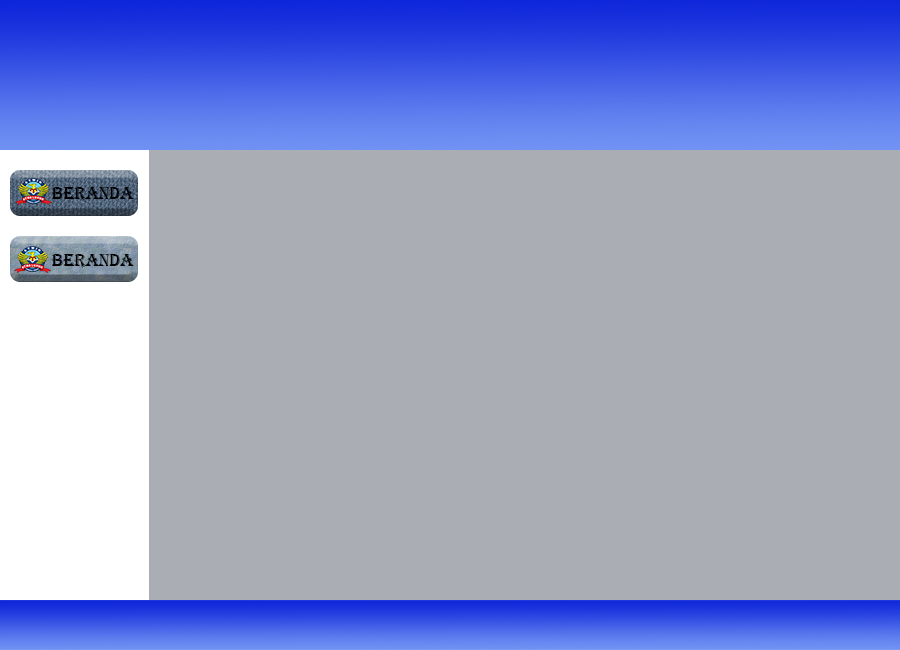
<style>
.page{position:relative;width:900px;height:650px;background:#aaadb3}
.page>*{position:absolute;margin:0}
.t1{font:17.6px "Algerian";color:#000000}
</style>
<div class="page">
<p class="t1" style="left:51px;top:187px;width:83px;height:14px">Beranda</p>
<p class="t1" style="left:51px;top:254px;width:83px;height:14px">Beranda</p>
</div>
